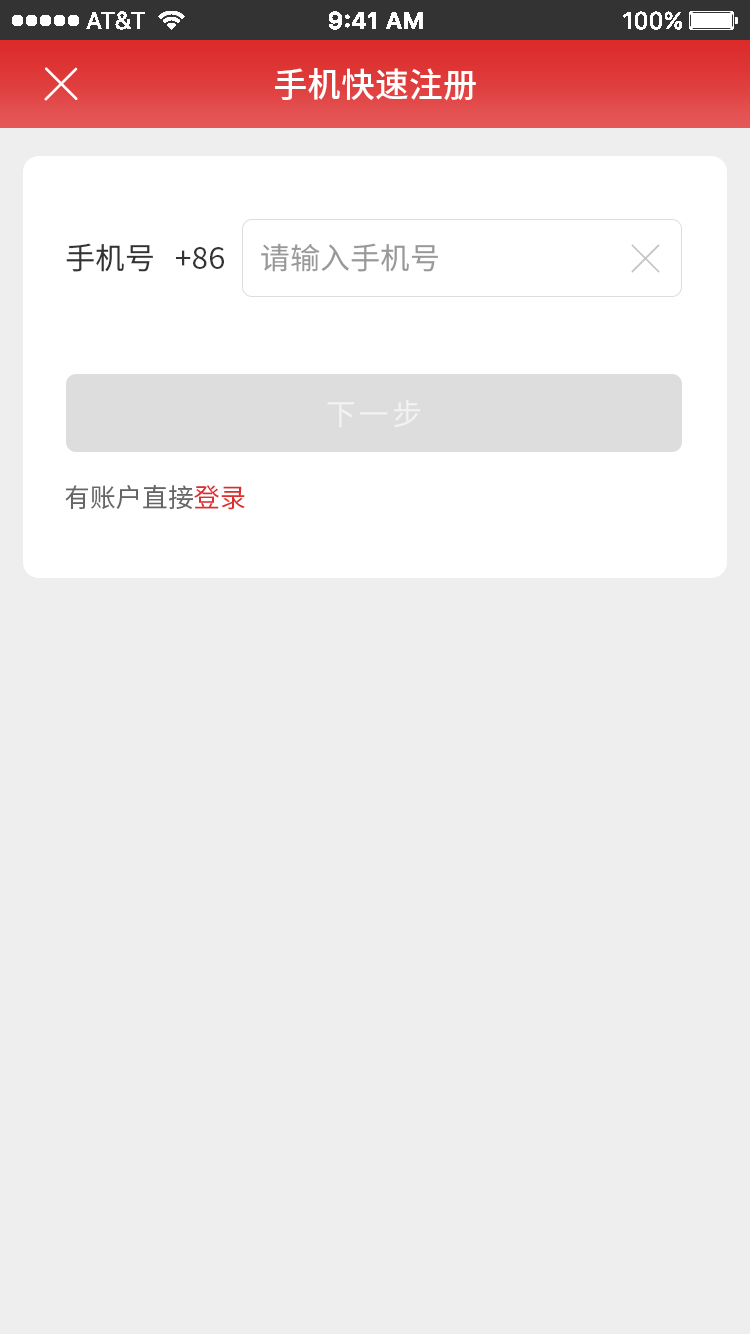
<style>
.page{position:relative;width:750px;height:1334px;background:#eeeeee}
.page>*{position:absolute;margin:0}
.t1{font:34px "SourceHanSansCN-Medium";color:#ffffff}
.t2{font:30px "SourceHanSansCN-Regular";color:#333333}
.t3{font:30px "SourceHanSansCN-Regular";color:#999999}
.t4{font:30px "SourceHanSansCN-Regular";letter-spacing:0.1em;color:#f2f2f2}
.t5{font:26px "SourceHanSansCN-Regular";color:#666666}
.t6{font:26px "SourceHanSansCN-Regular";color:#dd2f2f}
</style>
<div class="page">
<p class="t1" style="left:275px;top:68px;width:201px;height:33px">手机快速注册</p>
<p class="t2" style="left:66px;top:243px;width:87px;height:29px">手机号</p>
<p class="t3" style="left:261px;top:243px;width:177px;height:29px">请输入手机号</p>
<p class="t2" style="left:176px;top:247px;width:48px;height:22px">+86</p>
<p class="t4" style="left:327px;top:399px;width:94px;height:29px">下一步</p>
<p class="t5" style="left:65px;top:485px;width:180px;height:25px">有账户直接<span class="t6">登录</span></p>
</div>
